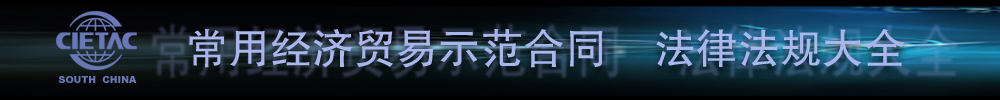
<style>
.page{position:relative;width:1000px;height:100px}
.page>*{position:absolute;margin:0}
.t1{font:42.1px "FZHTJW--GB1-0";color:#abb8ed}
</style>
<div class="page">
<p class="t1" style="left:189px;top:29px;width:716px;height:39px">常用经济贸易示范合同    法律法规大全</p>
</div>
